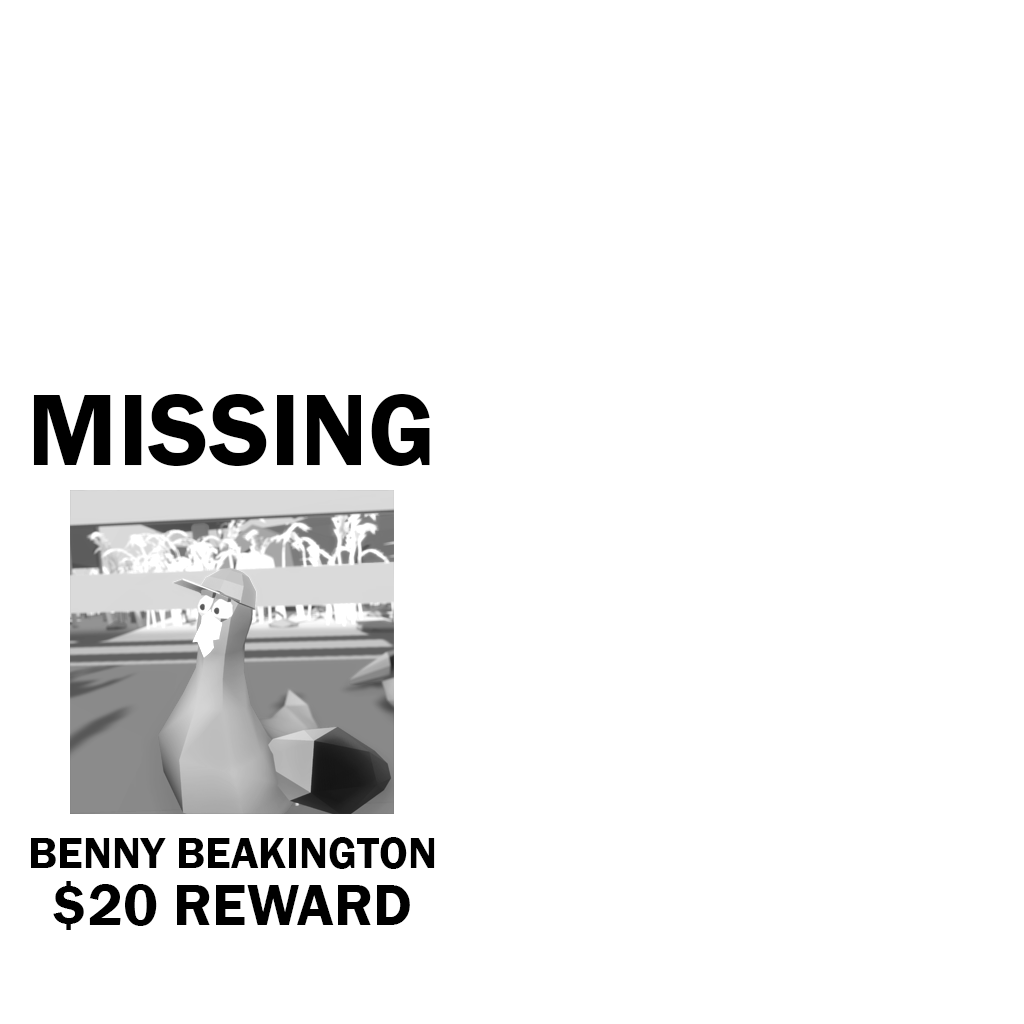
<style>
.page{position:relative;width:1024px;height:1024px;background:#ffffff}
.page>*{position:absolute;margin:0}
.t1{font:105px "FranklinGothic-Demi";color:#000000}
.t2{font:45px "FranklinGothic-Demi";color:#000000}
.t3{font:60px "FranklinGothic-Demi";color:#000000}
</style>
<div class="page">
<p class="t1" style="left:33px;top:394px;width:397px;height:72px">MISSING</p>
<p class="t2" style="left:31px;top:837px;width:404px;height:32px">BENNY BEAKINGTON</p>
<p class="t3" style="left:53px;top:881px;width:357px;height:49px">$20 REWARD</p>
</div>
